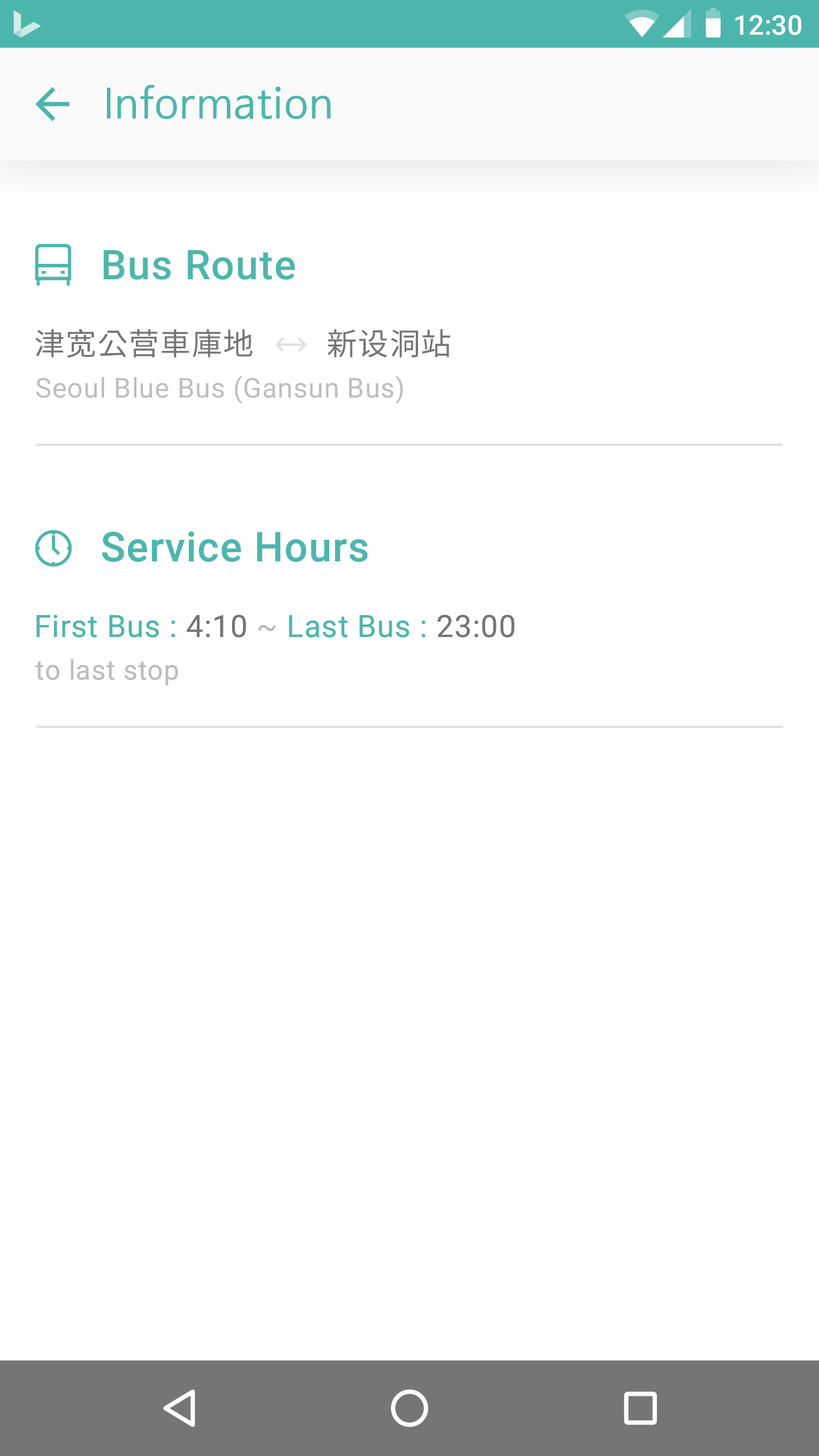
<style>
.page{position:relative;width:819px;height:1456px;background:#ffffff}
.page>*{position:absolute;margin:0}
.t1{font:27.3px "Roboto-Medium";color:#ffffff}
.t2{font:40.9px "NanumBarunGothic";letter-spacing:0.025em;color:#4db6ac}
.t3{font:40.9px "Roboto-Medium";letter-spacing:0.025em;color:#4db6ac}
.t4{font:30.7px "NotoSansCJKkr-Regular";letter-spacing:0.025em;color:#757575}
.t5{font:27.3px "Roboto-Regular";letter-spacing:0.025em;color:#bdbdbd}
.t6{font:30.7px "Roboto-Regular";letter-spacing:0.025em;color:#4db6ac}
.t7{font:30.7px "Roboto-Regular";letter-spacing:0.025em;color:#757575}
.t8{font:30.7px "Roboto-Regular";letter-spacing:0.025em;color:#bdbdbd}
</style>
<div class="page">
<p class="t1" style="left:735px;top:15px;width:66px;height:20px">12:30</p>
<p class="t2" style="left:107px;top:85px;width:223px;height:34px">Information</p>
<p class="t3" style="left:104px;top:250px;width:191px;height:30px">Bus Route</p>
<p class="t4" style="left:35px;top:329px;width:218px;height:29px">津宽公营車庫地</p>
<p class="t4" style="left:327px;top:329px;width:123px;height:29px">新设洞站</p>
<p class="t5" style="left:36px;top:375px;width:367px;height:29px">Seoul Blue Bus (Gansun Bus)</p>
<p class="t3" style="left:102px;top:531px;width:265px;height:31px">Service Hours</p>
<p class="t3" style="left:102px;top:531px;width:265px;height:31px">Service Hours</p>
<p class="t6" style="left:36px;top:615px;width:479px;height:23px">First Bus :<span class="t7"> 4:10 </span><span class="t8">~ </span>Last Bus :<span class="t7"> 23:00</span></p>
<p class="t6" style="left:36px;top:615px;width:479px;height:23px">First Bus :<span class="t7"> 4:10 </span><span class="t8">~ </span>Last Bus :<span class="t7"> 23:00</span></p>
<p class="t5" style="left:35px;top:659px;width:143px;height:26px">to last stop</p>
<p class="t5" style="left:35px;top:659px;width:143px;height:26px">to last stop</p>
</div>
